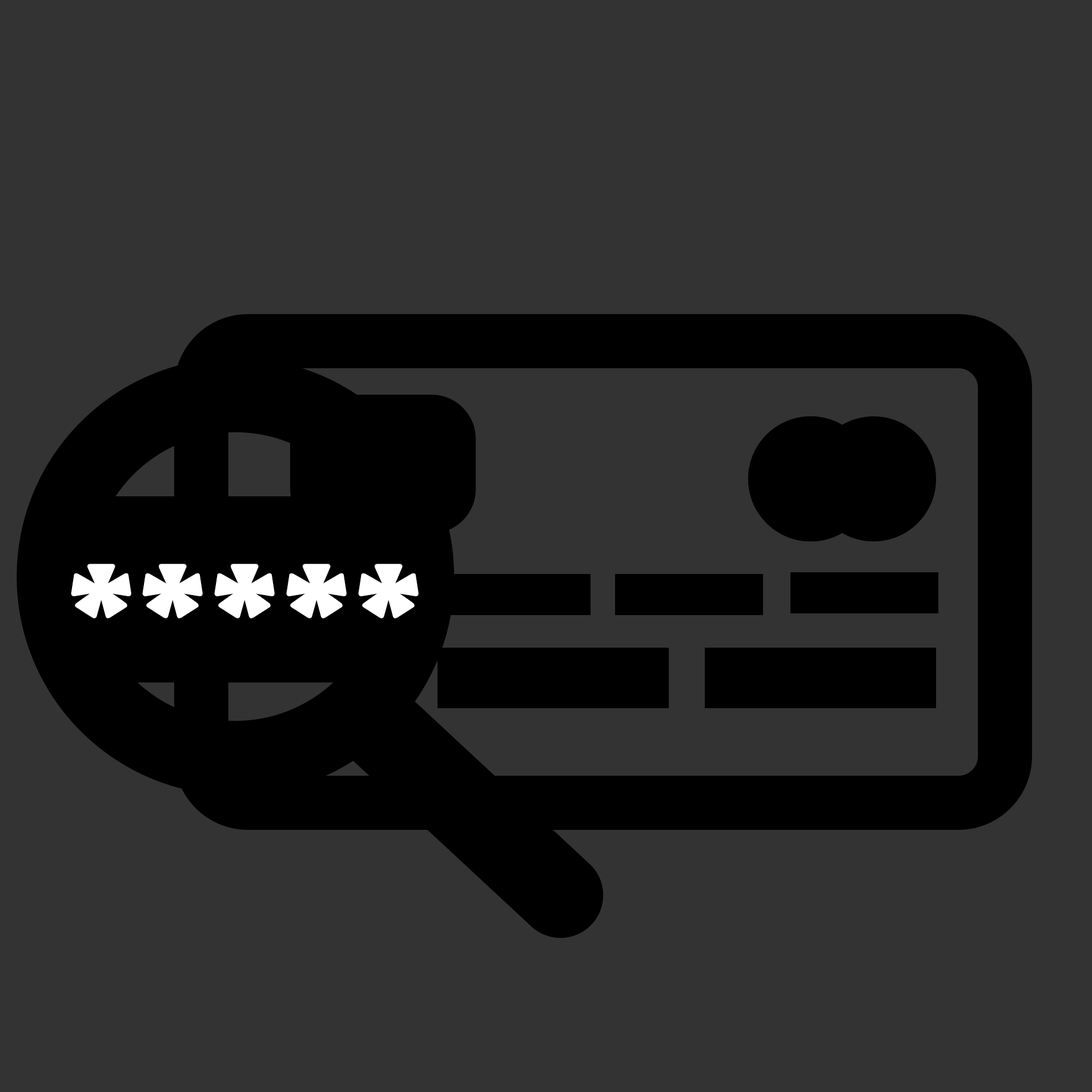
<style>
.page{position:relative;width:1092px;height:1092px;background:#333333}
.page>*{position:absolute;margin:0}
.t1{font:111.1px "BlackoakStd";letter-spacing:-0.01em;color:#ffffff;text-transform:uppercase;font-weight:bold;scale:0.91 1}
</style>
<div class="page">
<p class="t1" style="left:71px;top:564px;width:348px;height:55px">*****</p>
</div>
